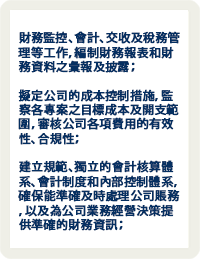
<style>
.page{position:relative;width:200px;height:259px;background:#ffffff}
.page>*{position:absolute;margin:0}
.t1{font:12px "KozGoPr6N-Medium";letter-spacing:0.005em;color:#052f61;font-weight:bold}
</style>
<div class="page">
<p class="t1" style="left:18px;top:31px;width:162px;height:200px">財務監控、會計、交收及稅務管理等工作，編制財務報表和財務資料之彙報及披露；<br><br>擬定公司的成本控制措施，監察各專案之目標成本及開支範圍，審核公司各項費用的有效性、合規性；<br><br>建立規範、獨立的會計核算體系、會計制度和內部控制體系，確保能準確及時處理公司賬務，以及為公司業務經營決策提供準確的財務資訊；</p>
</div>
